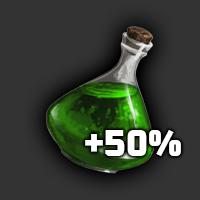
<style>
.page{position:relative;width:200px;height:200px;background:#333333}
.page>*{position:absolute;margin:0}
.t1{font:37.5px "Oxanium-ExtraBold";color:#ffffff}
</style>
<div class="page">
<p class="t1" style="left:85px;top:130px;width:96px;height:26px">+50%</p>
</div>
